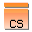
<style>
.page{position:relative;width:32px;height:32px;background:#ffffff}
.page>*{position:absolute;margin:0}
.t1{font:10px "Small Fonts";letter-spacing:0.02em;color:#000000;scale:1.04 1}
</style>
<div class="page">
<p class="t1" style="left:10px;top:20px;width:13px;height:8px">CS</p>
</div>
